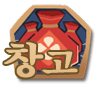
<style>
.page{position:relative;width:99px;height:88px;background:#ffffff}
.page>*{position:absolute;margin:0}
.t1{font:39px "MJemokBatang";letter-spacing:-0.08em;color:#e7c18f;font-weight:bold;scale:1.12 1}
.t2{font:32.9px "MJemokBatang";letter-spacing:-0.08em;color:#e7c18f;font-weight:bold;scale:1.12 1}
</style>
<div class="page">
<p class="t1" style="left:4px;top:42px;width:74px;height:36px">창<span class="t2">고</span></p>
</div>
